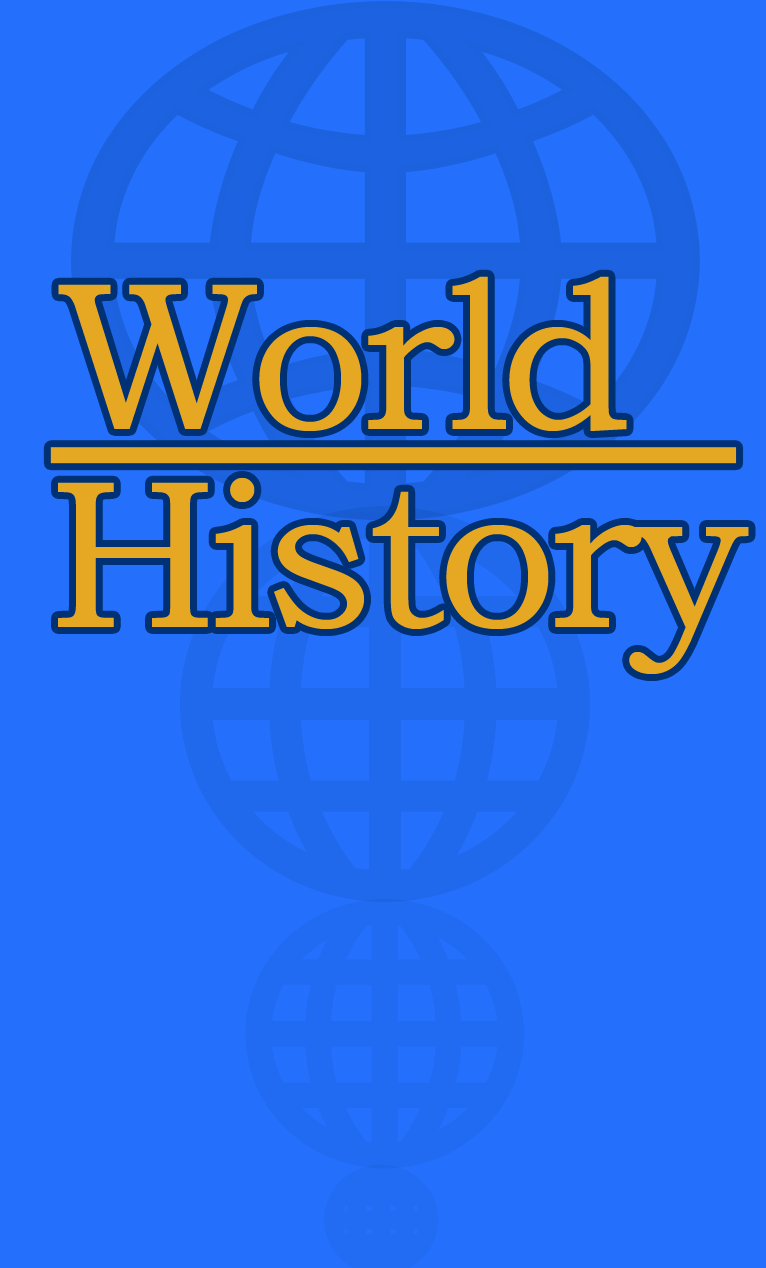
<style>
.page{position:relative;width:766px;height:1268px;background:#2470fd}
.page>*{position:absolute;margin:0}
.t1{font:212px "BookmanOldStyle";letter-spacing:-0.04em;color:#e6a822}
</style>
<div class="page">
<p class="t1" style="left:58px;top:276px;width:569px;height:155px">World</p>
<p class="t1" style="left:58px;top:477px;width:691px;height:197px">History</p>
</div>
